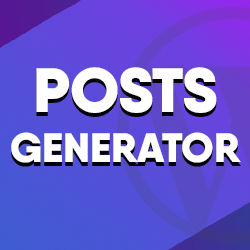
<style>
.page{position:relative;width:250px;height:250px}
.page>*{position:absolute;margin:0}
.t1{font:41.2px "Qanelas-Black";color:#ffffff}
.t2{font:62.5px "Qanelas-Black";color:#ffffff}
</style>
<div class="page">
<p class="t1" style="left:11px;top:67px;width:230px;height:96px;text-align:center"><span class="t2">POSTS<br></span>GENERATOR</p>
</div>
